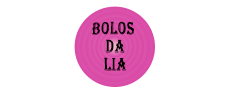
<style>
.page{position:relative;width:230px;height:89px;background:#ffffff}
.page>*{position:absolute;margin:0}
.t1{font:17.9px "Algerian";letter-spacing:0.07em;color:#000000;scale:0.69 1}
</style>
<div class="page">
<p class="t1" style="left:92px;top:21px;width:42px;height:50px;text-align:center">BOLOS <br>DA<br>LIA</p>
</div>
